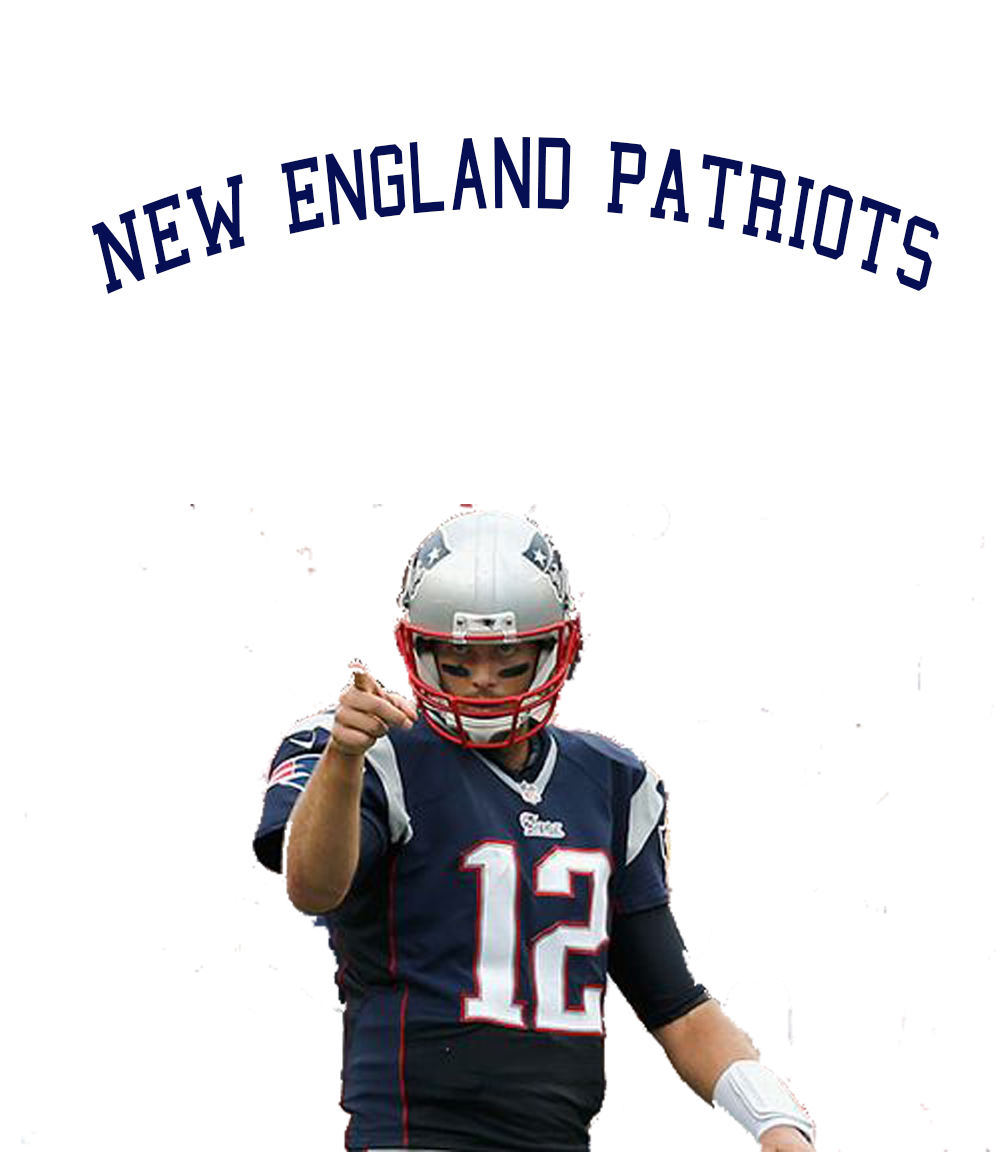
<style>
.page{position:relative;width:1008px;height:1152px;background:#ffffff}
.page>*{position:absolute;margin:0}
.t1{font:103.9px "College";color:#060e54;scale:0.75 1}
</style>
<div class="page">
<p class="t1" style="left:91px;top:137px;width:848px;height:157px">NEW England PATRIOTS</p>
</div>
